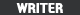
<style>
.page{position:relative;width:80px;height:15px;background:#333436}
.page>*{position:absolute;margin:0}
.t1{font:11px "HeadlineR-HM";letter-spacing:-0.02em;color:#ffffff}
</style>
<div class="page">
<p class="t1" style="left:16px;top:3px;width:47px;height:10px">WRITER</p>
</div>
